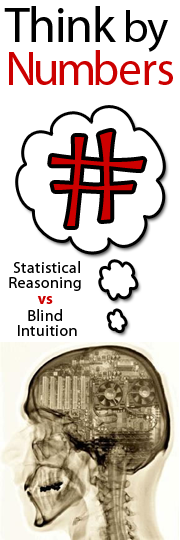
<style>
.page{position:relative;width:180px;height:540px;background:#ffffff}
.page>*{position:absolute;margin:0}
.t1{font:50px "MyriadPro-Regular";letter-spacing:-0.025em;color:#000000}
.t2{font:45px "MyriadPro-Regular";letter-spacing:-0.025em;color:#000000}
.t3{font:48px "MyriadPro-Regular";letter-spacing:-0.075em;color:#cc0000}
.t4{font:48px "MyriadPro-Regular";letter-spacing:-0.025em;color:#cc0000}
.t5{font:199px "CurlzMT";letter-spacing:-0.025em;color:#cc0000;scale:1.06 1}
.t6{font:16px "MyriadPro-Regular";letter-spacing:0.025em;color:#000000}
.t7{font:16px "MyriadPro-Bold";letter-spacing:0.025em;color:#cc0000}
</style>
<div class="page">
<p class="t1" style="left:4px;top:6px;width:169px;height:79px">Think <span class="t2">by<br></span><span class="t3">Num</span><span class="t4">bers</span></p>
<p class="t5" style="left:51px;top:132px;width:93px;height:94px">#</p>
<p class="t6" style="left:9px;top:261px;width:72px;height:75px;text-align:center">Statistical<br>Reasoning <br><span class="t7">vs <br></span>Blind <br>Intuition</p>
</div>
